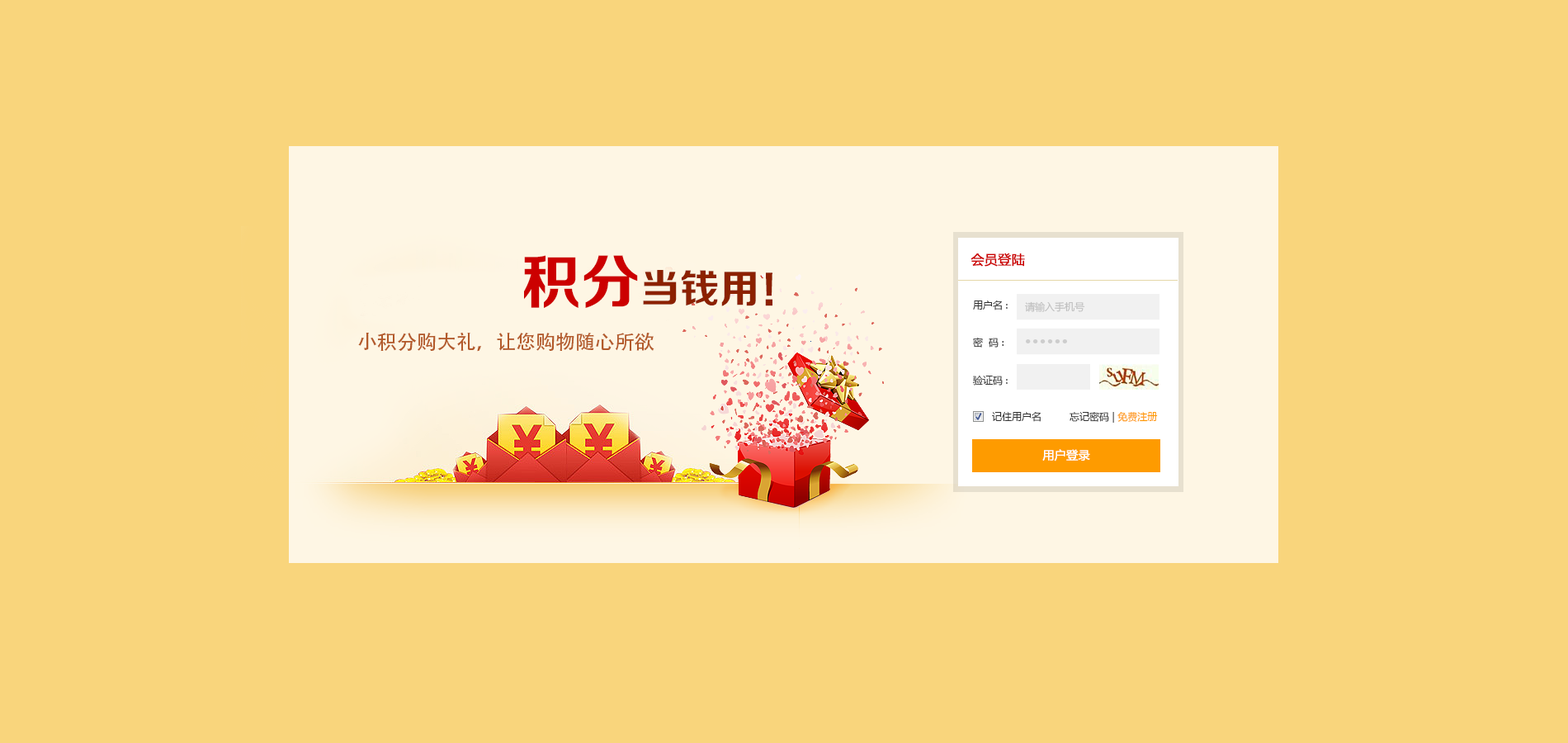
<style>
.page{position:relative;width:1568px;height:743px;background:#f9d57c}
.page>*{position:absolute;margin:0}
.t1{font:39.6px "FZZCHJW--GB1-0";color:#8c2100}
.t2{font:59.4px "FZZCHJW--GB1-0";color:#cc0000}
.t3{font:13.2px "MicrosoftYaHei";color:#cc0000;font-weight:bold}
.t4{font:9.9px "MicrosoftYaHei";color:#333333}
.t5{font:9.9px "MicrosoftYaHei";color:#c1c1c1}
.t6{font:19.8px "AdobeHeitiStd-Regular";color:#b35a2a}
.t7{font:9.9px "MicrosoftYaHei";color:#fe9900}
.t8{font:11.6px "MicrosoftYaHei";color:#ffffff;font-weight:bold}
</style>
<div class="page">
<p class="t1" style="left:524px;top:255px;width:248px;height:53px"><span class="t2">积分</span>当钱用！</p>
<p class="t3" style="left:971px;top:253px;width:54px;height:14px">会员登陆</p>
<p class="t4" style="left:973px;top:300px;width:35px;height:10px">用户名 :</p>
<p class="t5" style="left:1025px;top:301px;width:60px;height:11px">请输入手机号</p>
<p class="t6" style="left:358px;top:332px;width:296px;height:20px">小积分购大礼，让您购物随心所欲</p>
<p class="t4" style="left:973px;top:338px;width:31px;height:9px">密  码 :</p>
<p class="t4" style="left:972px;top:375px;width:36px;height:10px">验证码 :</p>
<p class="t4" style="left:992px;top:412px;width:49px;height:10px">记住用户名</p>
<p class="t4" style="left:1070px;top:411px;width:88px;height:12px">忘记密码 | <span class="t7">免费注册</span></p>
<p class="t8" style="left:1042px;top:449px;width:48px;height:12px">用户登录</p>
</div>
